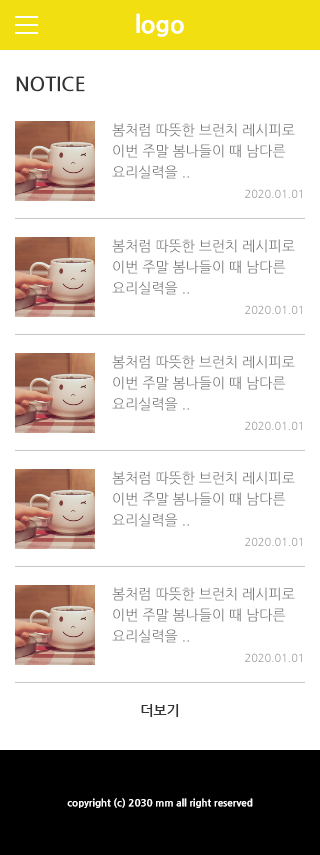
<style>
.page{position:relative;width:320px;height:855px;background:#ffffff}
.page>*{position:absolute;margin:0}
.t1{font:24px "NanumGothicExtraBold";color:#ffffff}
.t2{font:20px "NanumGothicBold";color:#333333;text-transform:uppercase}
.t3{font:14px/21px "NanumGothic";color:#767676;text-transform:uppercase}
.t4{font:11px/21px "NanumGothic";color:#999999;text-transform:uppercase}
.t5{font:14px "NanumGothicBold";color:#333333}
.t6{font:10px "NanumGothicExtraBold";color:#ffffff}
</style>
<div class="page">
<p class="t1" style="left:136px;top:13px;width:48px;height:24px">logo</p>
<p class="t2" style="left:16px;top:76px;width:69px;height:16px">notice</p>
<p class="t3" style="left:112px;top:123px;width:190px;height:75px">봄처럼 따뜻한 브런치 레시피로 이번 주말 봄나들이 때 남다른 요리실력을 ..<br><span class="t4">2020.01.01</span></p>
<p class="t3" style="left:112px;top:239px;width:190px;height:75px">봄처럼 따뜻한 브런치 레시피로 이번 주말 봄나들이 때 남다른 요리실력을 ..<br><span class="t4">2020.01.01</span></p>
<p class="t3" style="left:112px;top:355px;width:190px;height:75px">봄처럼 따뜻한 브런치 레시피로 이번 주말 봄나들이 때 남다른 요리실력을 ..<br><span class="t4">2020.01.01</span></p>
<p class="t3" style="left:112px;top:471px;width:190px;height:75px">봄처럼 따뜻한 브런치 레시피로 이번 주말 봄나들이 때 남다른 요리실력을 ..<br><span class="t4">2020.01.01</span></p>
<p class="t3" style="left:112px;top:587px;width:190px;height:75px">봄처럼 따뜻한 브런치 레시피로 이번 주말 봄나들이 때 남다른 요리실력을 ..<br><span class="t4">2020.01.01</span></p>
<p class="t5" style="left:141px;top:704px;width:38px;height:13px">더보기</p>
<p class="t6" style="left:67px;top:798px;width:186px;height:10px">copyright (c) 2030 mm all right reserved</p>
</div>
